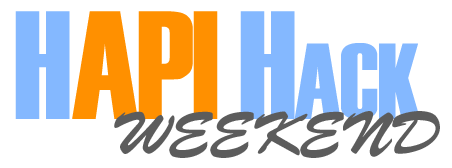
<style>
.page{position:relative;width:452px;height:168px;background:#ffffff}
.page>*{position:absolute;margin:0}
.t1{font:154px "Haettenschweiler";letter-spacing:-0.02em;color:#84b8ff;text-transform:uppercase}
.t2{font:154px "Haettenschweiler";letter-spacing:-0.02em;color:#ff9000;text-transform:uppercase}
.t3{font:154px "Haettenschweiler";letter-spacing:-0.02em;color:#84b8ff;font-variant:small-caps}
.t4{font:60px "BrushScriptStd";letter-spacing:-0.02em;color:#5c5c5c;text-transform:uppercase}
</style>
<div class="page">
<p class="t1" style="left:15px;top:11px;width:55px;height:108px">h</p>
<p class="t2" style="left:72px;top:11px;width:146px;height:108px">api</p>
<p class="t3" style="left:240px;top:11px;width:181px;height:109px">Hack</p>
<p class="t4" style="left:114px;top:111px;width:326px;height:47px">weekend</p>
</div>
